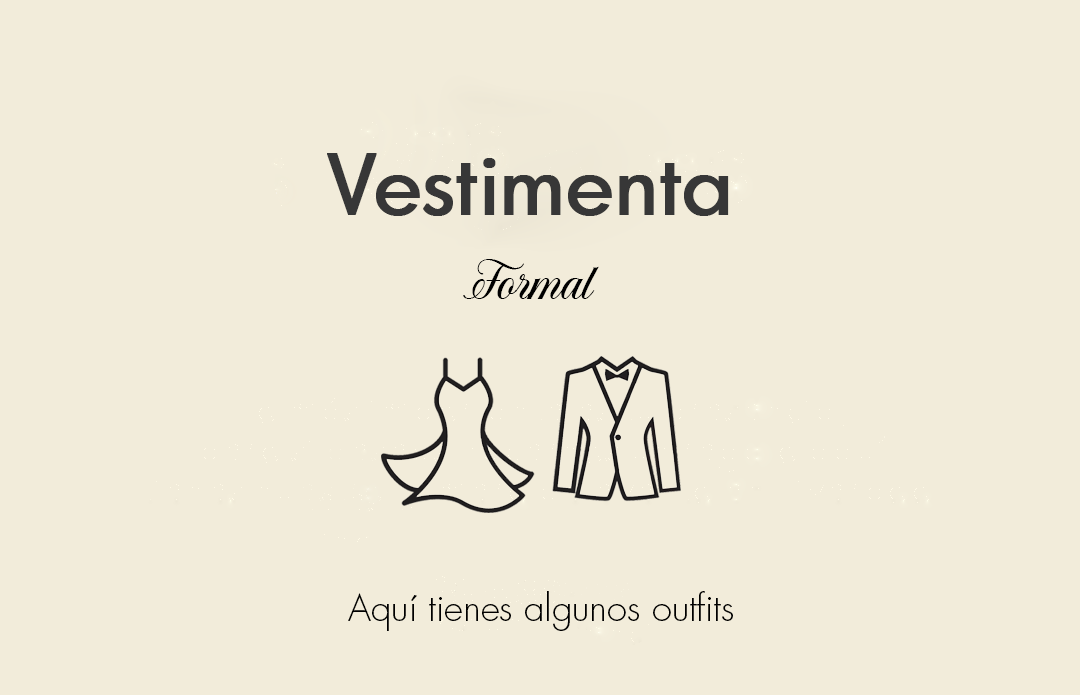
<style>
.page{position:relative;width:1080px;height:695px;background:#f2ecda}
.page>*{position:absolute;margin:0}
.t1{font:81.3px "GraphicusDT-Regular";color:#373737;font-weight:bold}
.t2{font:40.3px "SolistariaScript-Italic";color:#000000}
.t3{font:36.3px "Futura-Light";color:#000000}
</style>
<div class="page">
<p class="t1" style="left:327px;top:153px;width:402px;height:63px">Vestimenta</p>
<p class="t2" style="left:463px;top:259px;width:136px;height:40px">Formal</p>
<p class="t3" style="left:348px;top:591px;width:385px;height:40px">Aquí tienes algunos outfits</p>
</div>
